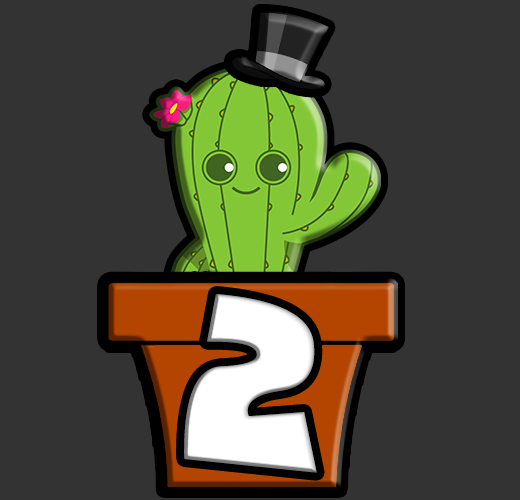
<style>
.page{position:relative;width:520px;height:500px;background:#333333}
.page>*{position:absolute;margin:0}
.t1{font:215.4px "Funhouse";color:#ffffff}
</style>
<div class="page">
<p class="t1" style="left:184px;top:294px;width:133px;height:179px">2</p>
</div>
